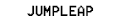
<style>
.page{position:relative;width:126px;height:22px;background:#ffffff}
.page>*{position:absolute;margin:0}
.t1{font:18px "8514oem";color:#000000}
</style>
<div class="page">
<p class="t1" style="left:27px;top:5px;width:67px;height:11px">JUMPLEAP</p>
</div>
